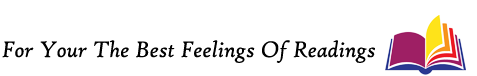
<style>
.page{position:relative;width:477px;height:76px;background:#ffffff}
.page>*{position:absolute;margin:0}
.t1{font:24px "HighTowerText-Italic";color:#000000}
</style>
<div class="page">
<p class="t1" style="left:2px;top:40px;width:373px;height:23px">For Your The Best Feelings Of Readings</p>
</div>
